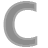
<style>
.page{position:relative;width:48px;height:48px;background:#ffffff}
.page>*{position:absolute;margin:0}
.t1{font:91.7px "Corbel-Bold";color:#8d8d8d}
</style>
<div class="page">
<p class="t1" style="left:3px;top:1px;width:35px;height:46px">c</p>
</div>
